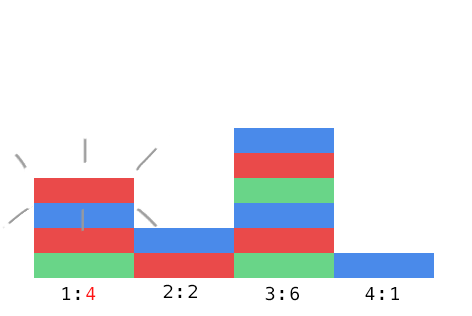
<style>
.page{position:relative;width:472px;height:316px;background:#ffffff}
.page>*{position:absolute;margin:0}
.t1{font:18px "Menlo-Regular";letter-spacing:0.08em;color:#000000}
.t2{font:18px "Menlo-Regular";letter-spacing:0.08em;color:#ff1212}
</style>
<div class="page">
<p class="t1" style="left:62px;top:287px;width:34px;height:13px">1:<span class="t2">4</span></p>
<p class="t1" style="left:163px;top:284px;width:34px;height:14px">2:2</p>
<p class="t1" style="left:265px;top:286px;width:34px;height:15px">3:6</p>
<p class="t1" style="left:365px;top:287px;width:34px;height:13px">4:1</p>
</div>
